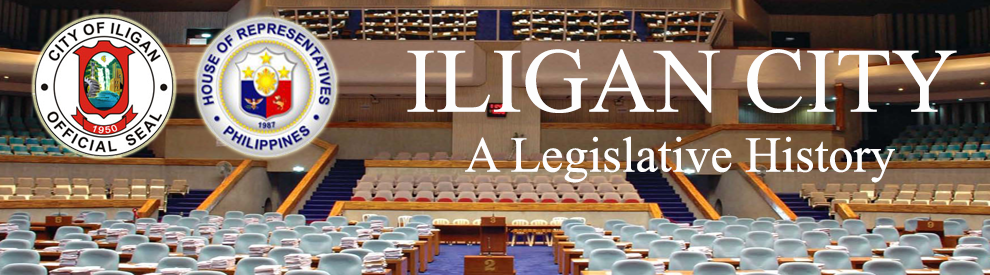
<style>
.page{position:relative;width:990px;height:275px}
.page>*{position:absolute;margin:0}
.t1{font:50px "TimesNewRomanPSMT";color:#fdfcfc}
.t2{font:91.7px "TimesNewRomanPSMT";color:#fdfdfd}
</style>
<div class="page">
<p class="t1" style="left:407px;top:49px;width:550px;height:134px;text-align:center"><span class="t2">ILIGAN CITY<br></span>A Legislative History</p>
</div>
